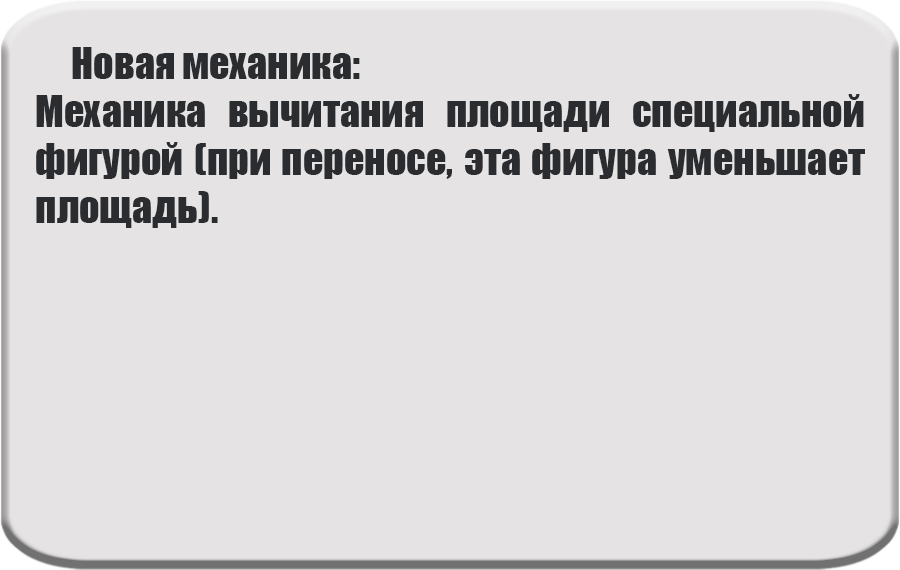
<style>
.page{position:relative;width:900px;height:570px;background:#e5e3e3}
.page>*{position:absolute;margin:0}
.t1{font:40px "Impact";color:#2a2c30}
</style>
<div class="page">
<p class="t1" style="left:36px;top:47px;width:829px;height:181px;text-align:justify">Новая механика:<br>Механика вычитания площади специальной фигурой (при переносе, эта фигура уменьшает площадь).</p>
</div>
